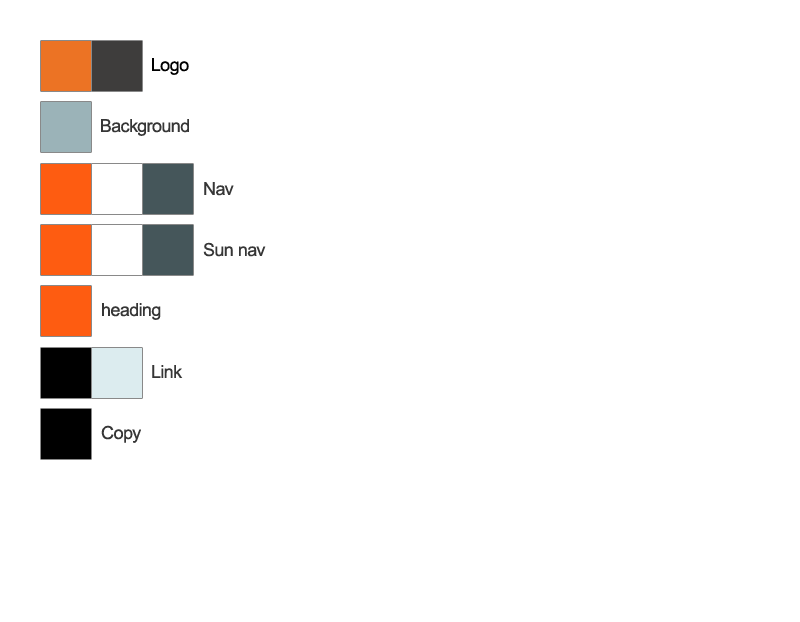
<style>
.page{position:relative;width:800px;height:622px;background:#ffffff}
.page>*{position:absolute;margin:0}
.t1{font:18px "ArialMT";letter-spacing:-0.025em;color:#000000}
.t2{font:18px "ArialMT";letter-spacing:-0.025em;color:#363636}
</style>
<div class="page">
<p class="t1" style="left:152px;top:58px;width:37px;height:17px">Logo</p>
<p class="t2" style="left:101px;top:119px;width:88px;height:17px">Background</p>
<p class="t2" style="left:204px;top:182px;width:30px;height:14px">Nav</p>
<p class="t2" style="left:203px;top:242px;width:63px;height:15px">Sun nav</p>
<p class="t2" style="left:102px;top:303px;width:59px;height:17px">heading</p>
<p class="t2" style="left:152px;top:365px;width:31px;height:13px">Link</p>
<p class="t2" style="left:101px;top:425px;width:40px;height:18px">Copy</p>
</div>
